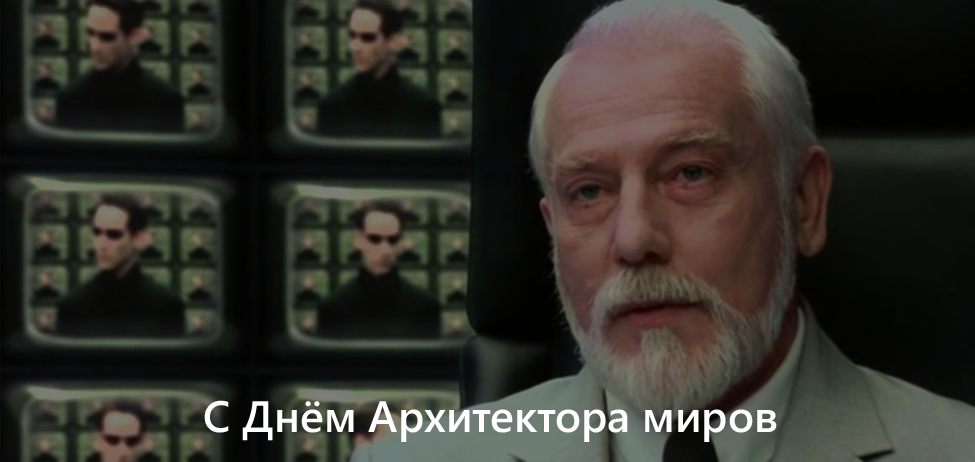
<style>
.page{position:relative;width:975px;height:462px}
.page>*{position:absolute;margin:0}
.t1{font:44px "SegoeUI-SemiBold";color:#ffffff}
</style>
<div class="page">
<p class="t1" style="left:204px;top:400px;width:573px;height:42px">С Днём Архитектора миров</p>
</div>
